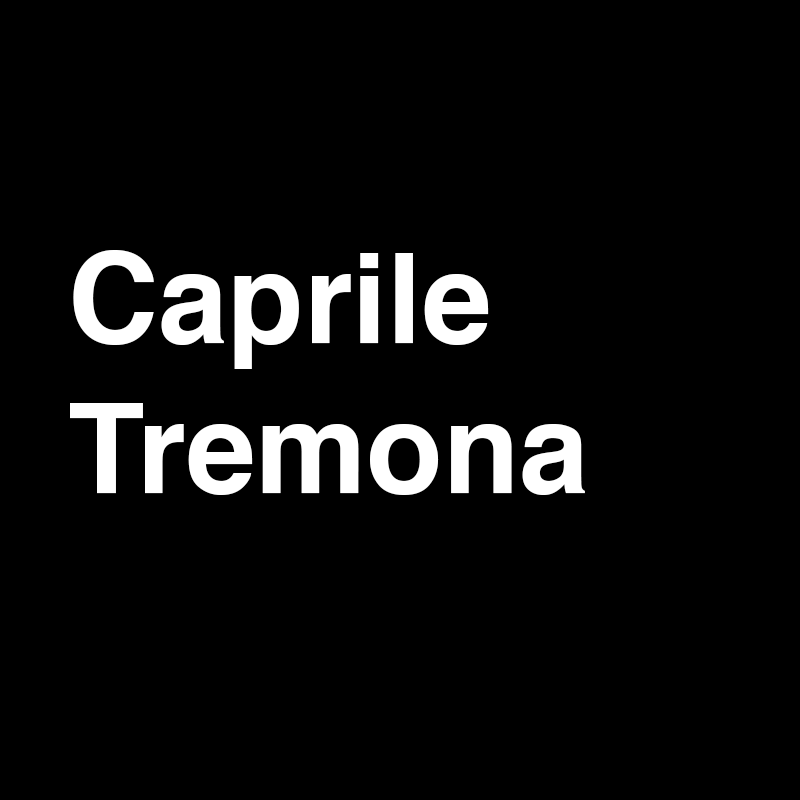
<style>
.page{position:relative;width:800px;height:800px;background:#000000}
.page>*{position:absolute;margin:0}
.t1{font:125px "Helvetica-Bold";color:#ffffff}
</style>
<div class="page">
<p class="t1" style="left:70px;top:250px;width:515px;height:245px">Caprile<br>Tremona</p>
</div>
